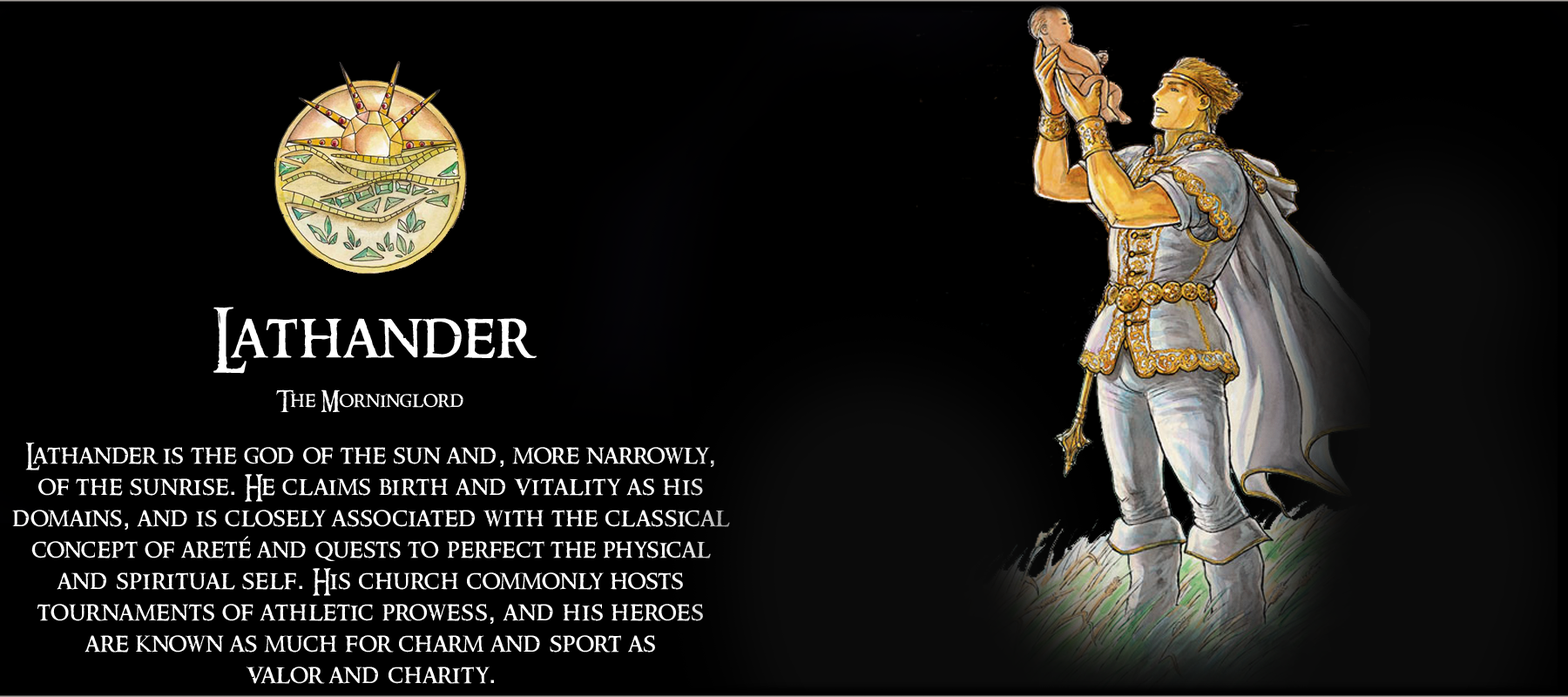
<style>
.page{position:relative;width:1568px;height:697px;background:#000000}
.page>*{position:absolute;margin:0}
.t1{font:26.1px "RingbearerMedium";letter-spacing:0.025em;color:#ffffff}
.t2{font:62.7px "RingbearerMedium";letter-spacing:0.025em;color:#ffffff}
.t3{font:20.9px "RingbearerMedium";letter-spacing:0.025em;color:#ffffff}
.t4{font:26.1px "Rockwell";letter-spacing:0.025em;color:#ffffff}
</style>
<div class="page">
<p class="t1" style="left:12px;top:307px;width:718px;height:377px;text-align:center"><span class="t2">Lathander<br></span><span class="t3"><br>The Morninglord<br><br></span>Lathander is the god of the sun and<span class="t4">,</span> more narrowly<span class="t4">,</span> <br>of the sunrise<span class="t4">.</span> He claims birth and vitality as his <br>domains<span class="t4">,</span> and is closely associated with the classical<br>concept of areté and quests to perfect the physical <br>and spiritual self<span class="t4">.</span> His church commonly hosts<br>tournaments of athletic prowess<span class="t4">,</span> and his heroes <br>are known as much for charm and sport as <br>valor and charity<span class="t4">.</span></p>
</div>
